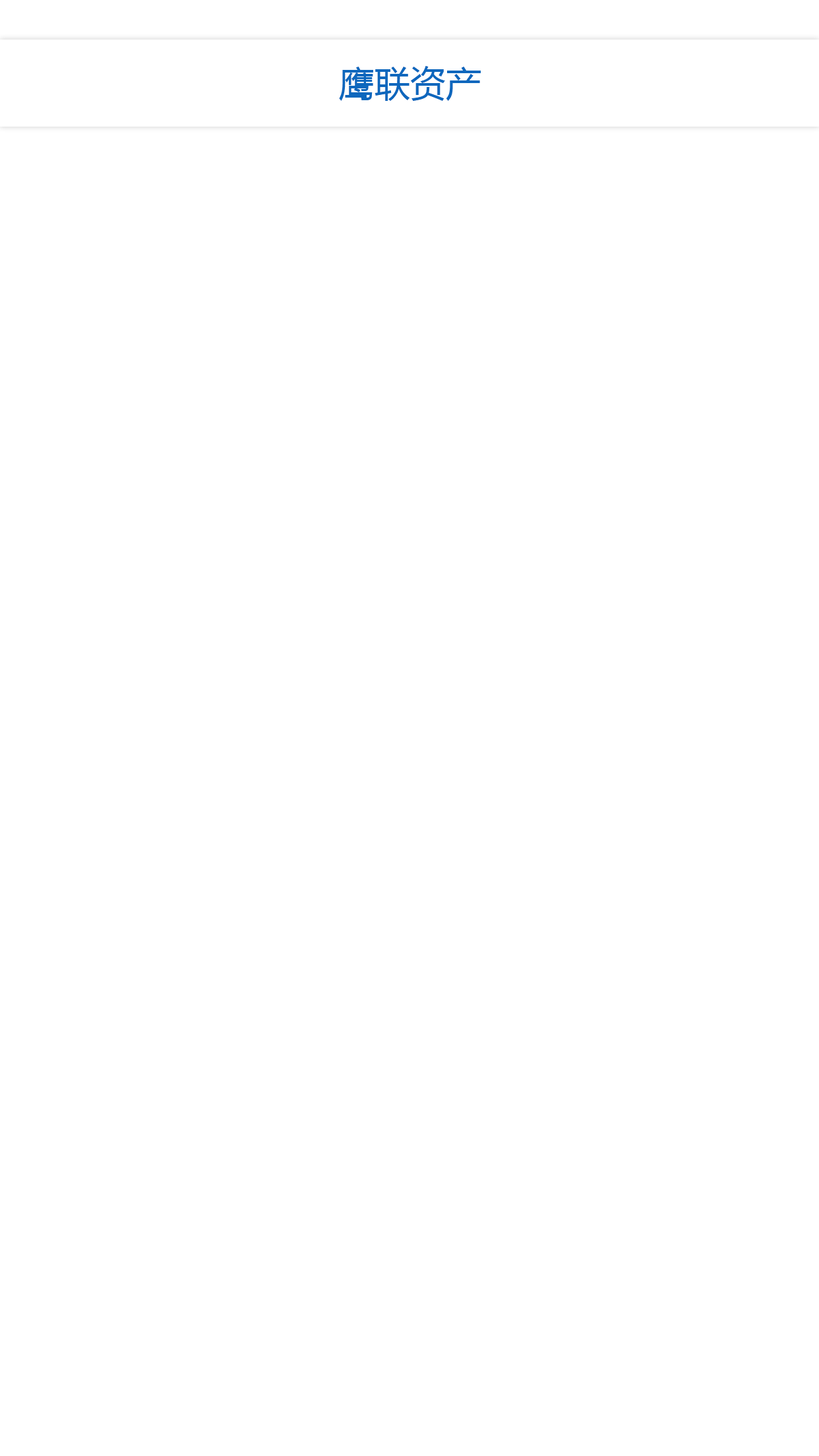
<style>
.page{position:relative;width:819px;height:1456px;background:#ffffff}
.page>*{position:absolute;margin:0}
.t1{font:35.6px "MicrosoftYaHei";color:#0d67bd}
</style>
<div class="page">
<p class="t1" style="left:339px;top:66px;width:142px;height:35px">鹰联资产</p>
</div>
